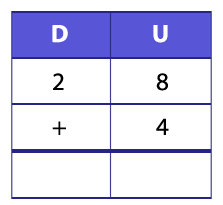
<style>
.page{position:relative;width:223px;height:205px;background:#ffffff}
.page>*{position:absolute;margin:0}
.t1{font:25px "MyriadPro-Bold";color:#ffffff}
.t2{font:25px "MyriadPro-Regular";color:#000000}
</style>
<div class="page">
<p class="t1" style="left:52px;top:25px;width:16px;height:18px">D</p>
<p class="t1" style="left:153px;top:25px;width:15px;height:18px">U</p>
<p class="t2" style="left:53px;top:73px;width:11px;height:17px">2</p>
<p class="t2" style="left:156px;top:73px;width:12px;height:18px">8</p>
<p class="t2" style="left:52px;top:121px;width:14px;height:14px">+</p>
<p class="t2" style="left:156px;top:118px;width:13px;height:17px">4</p>
</div>
